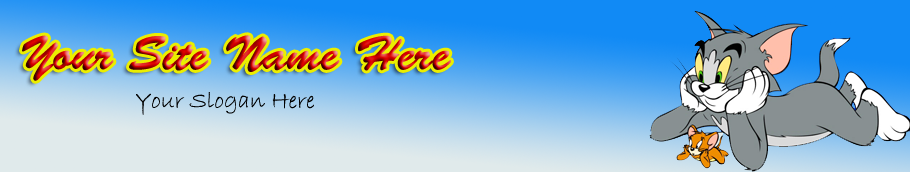
<style>
.page{position:relative;width:910px;height:172px}
.page>*{position:absolute;margin:0}
.t1{font:48px "BrushScriptStd"}
.t2{font:24px "BradleyHandITC";color:#000000}
</style>
<div class="page">
<p class="t1" style="left:22px;top:35px;width:429px;height:46px">Your Site Name Here</p>
<p class="t2" style="left:136px;top:92px;width:178px;height:23px">Your Slogan Here</p>
</div>
